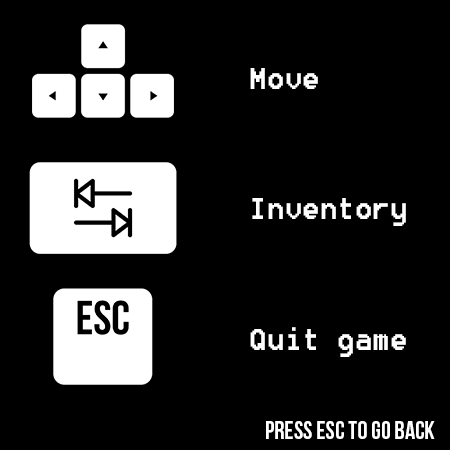
<style>
.page{position:relative;width:450px;height:450px;background:#000000}
.page>*{position:absolute;margin:0}
.t1{font:37.5px "8514oem";color:#ffffff}
.t2{font:25px "BebasNeue";color:#ffffff}
</style>
<div class="page">
<p class="t1" style="left:250px;top:68px;width:68px;height:21px">Move</p>
<p class="t1" style="left:252px;top:198px;width:154px;height:28px">Inventory</p>
<p class="t1" style="left:250px;top:327px;width:156px;height:30px">Quit game</p>
<p class="t2" style="left:266px;top:421px;width:169px;height:18px">Press esc to go back</p>
</div>
